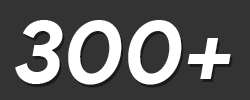
<style>
.page{position:relative;width:250px;height:100px;background:#333333}
.page>*{position:absolute;margin:0}
.t1{font:90px "ProductSans-BoldItalic";color:#ffffff}
</style>
<div class="page">
<p class="t1" style="left:15px;top:20px;width:216px;height:65px">300+</p>
</div>
